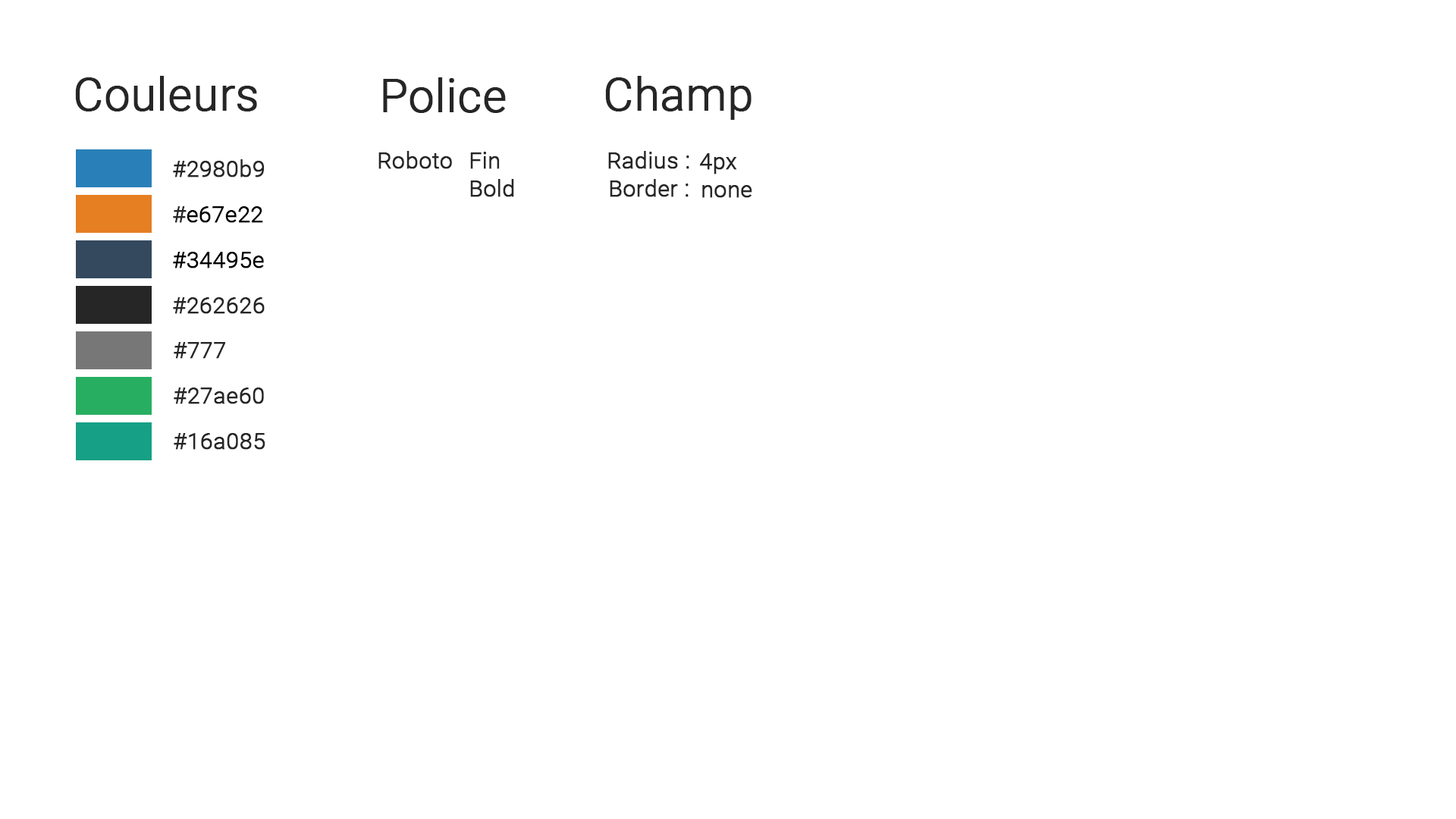
<style>
.page{position:relative;width:1456px;height:819px;background:#ffffff}
.page>*{position:absolute;margin:0}
.t1{font:45.5px "Roboto-Light";color:#262626;font-weight:bold}
.t2{font:22.7px "Roboto-Light";color:#262626;font-weight:bold}
.t3{font:22.7px "Roboto-Light";color:#000000;font-weight:bold}
</style>
<div class="page">
<p class="t1" style="left:75px;top:76px;width:182px;height:35px">Couleurs</p>
<p class="t1" style="left:383px;top:77px;width:123px;height:36px">Police</p>
<p class="t1" style="left:605px;top:76px;width:146px;height:44px">Champ</p>
<p class="t2" style="left:173px;top:159px;width:92px;height:18px">#2980b9</p>
<p class="t2" style="left:378px;top:151px;width:74px;height:18px">Roboto</p>
<p class="t2" style="left:470px;top:152px;width:30px;height:17px">Fin</p>
<p class="t2" style="left:608px;top:151px;width:81px;height:18px">Radius :</p>
<p class="t2" style="left:700px;top:153px;width:37px;height:21px">4px</p>
<p class="t2" style="left:470px;top:179px;width:44px;height:18px">Bold</p>
<p class="t2" style="left:610px;top:179px;width:79px;height:18px">Border :</p>
<p class="t2" style="left:702px;top:185px;width:50px;height:13px">none</p>
<p class="t3" style="left:173px;top:206px;width:90px;height:17px"><span class="t2">#</span>e67e22</p>
<p class="t3" style="left:173px;top:252px;width:91px;height:16px">#34495e</p>
<p class="t2" style="left:173px;top:297px;width:92px;height:17px">#262626</p>
<p class="t2" style="left:174px;top:342px;width:51px;height:17px">#777</p>
<p class="t2" style="left:174px;top:388px;width:90px;height:16px">#27ae60</p>
<p class="t2" style="left:174px;top:433px;width:91px;height:17px">#16a085</p>
</div>
